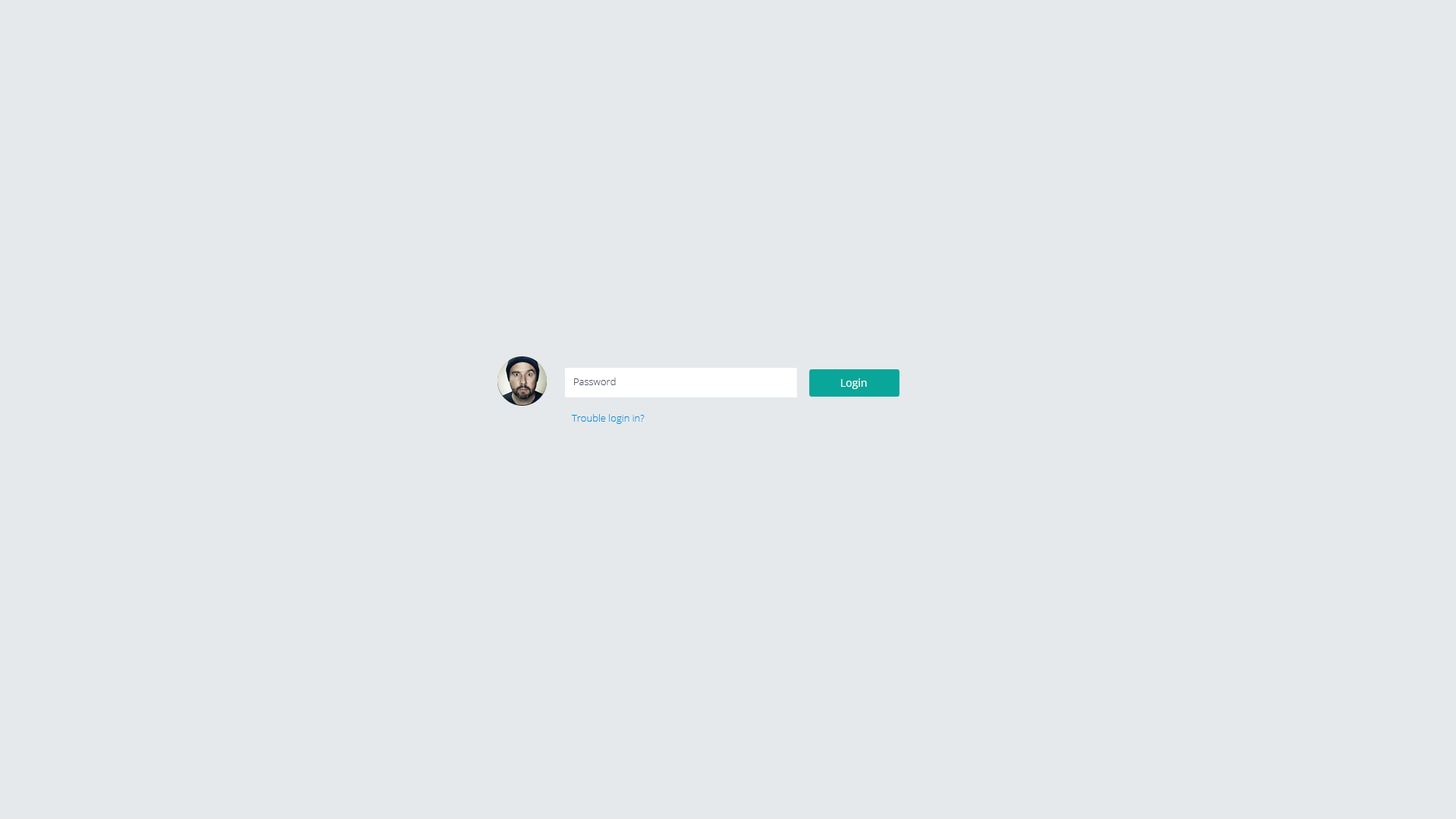
<style>
.page{position:relative;width:1456px;height:819px;background:#e5e9ec}
.page>*{position:absolute;margin:0}
.t1{font:9.9px "OpenSans-Light";color:#525965}
.t2{font:10.6px "OpenSans";color:#ffffff}
.t3{font:9.9px "OpenSans-Light";color:#0090d9}
</style>
<div class="page">
<p class="t1" style="left:574px;top:378px;width:42px;height:7px">Password</p>
<p class="t2" style="left:841px;top:378px;width:26px;height:11px">Login</p>
<p class="t3" style="left:571px;top:414px;width:74px;height:10px">Trouble login in?</p>
</div>
